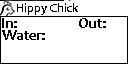
<style>
.page{position:relative;width:128px;height:64px;background:#ffffff}
.page>*{position:absolute;margin:0}
.t1{font:12px "Candara-Bold";color:#000000}
.t2{font:16px "Candara-Bold";letter-spacing:-0.05em;color:#000000}
.t3{font:16px "Candara-Bold";letter-spacing:-0.025em;color:#000000}
</style>
<div class="page">
<p class="t1" style="left:17px;top:3px;width:61px;height:12px">Hippy Chick</p>
<p class="t2" style="left:2px;top:30px;width:43px;height:10px">Water:</p>
<p class="t3" style="left:2px;top:18px;width:15px;height:10px">In:</p>
<p class="t2" style="left:79px;top:18px;width:27px;height:10px">Out:</p>
</div>
